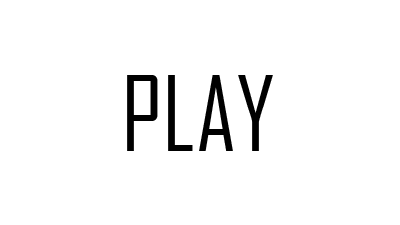
<style>
.page{position:relative;width:400px;height:225px;background:#ffffff}
.page>*{position:absolute;margin:0}
.t1{font:100px "AgencyFB-Reg";color:#000000}
</style>
<div class="page">
<p class="t1" style="left:127px;top:75px;width:146px;height:76px">PLAY</p>
</div>
